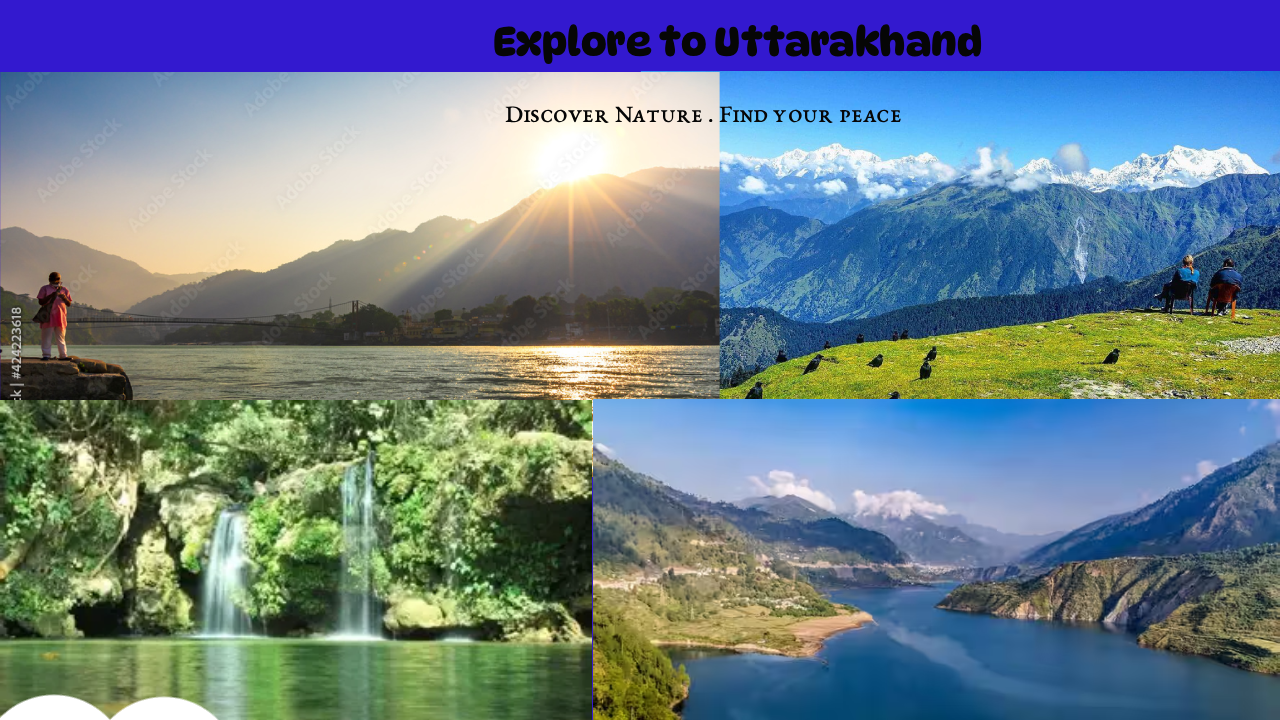
<style>
.page{position:relative;width:1280px;height:720px}
.page>*{position:absolute;margin:0}
.t1{font:40px "DynaPuff-SemiBold_619.000wght_100.000wdth";color:#060606}
.t2{font:26px "EBGaramondSC12-Regular";color:#060606}
</style>
<div class="page">
<p class="t1" style="left:494px;top:24px;width:488px;height:41px">Explore to Uttarakhand</p>
<p class="t2" style="left:505px;top:106px;width:396px;height:17px">Discover Nature . Find your peace</p>
</div>
